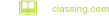
<style>
.page{position:relative;width:109px;height:16px;background:#ffffff}
.page>*{position:absolute;margin:0}
.t1{font:9.6px "ArialMT";color:#b8db40;scale:1.03 1}
.t2{font:9.6px "ArialMT";color:#fefefc;scale:1.03 1}
</style>
<div class="page">
<p class="t1" style="left:39px;top:5px;width:70px;height:9px"><span class="t2">Go</span>classing.com</p>
</div>
